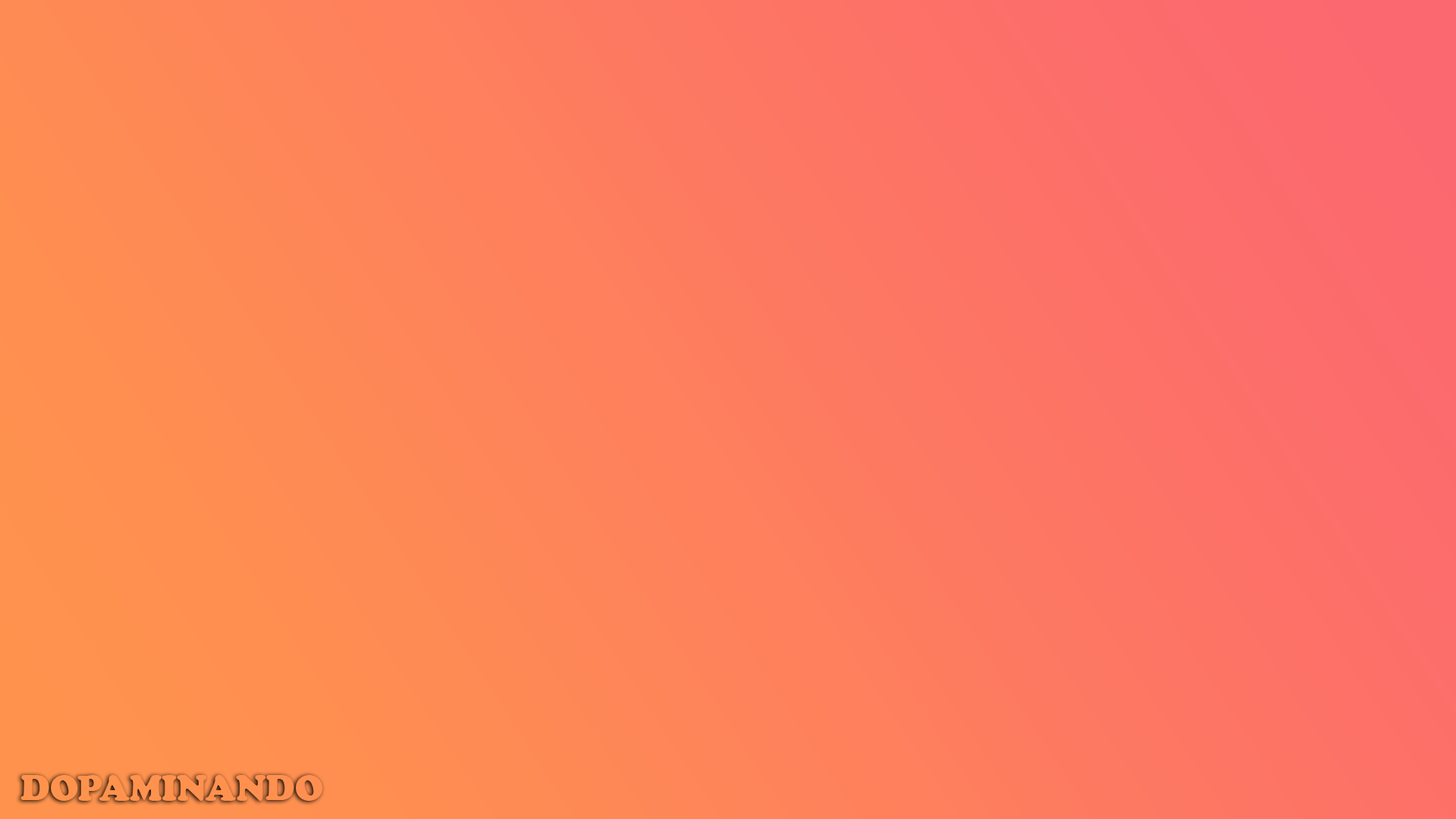
<style>
.page{position:relative;width:1456px;height:819px}
.page>*{position:absolute;margin:0}
.t1{font:36.4px "CooperBlack";color:#ff924e;text-transform:uppercase}
</style>
<div class="page">
<p class="t1" style="left:20px;top:775px;width:303px;height:26px">DOPAMINANDO</p>
</div>
